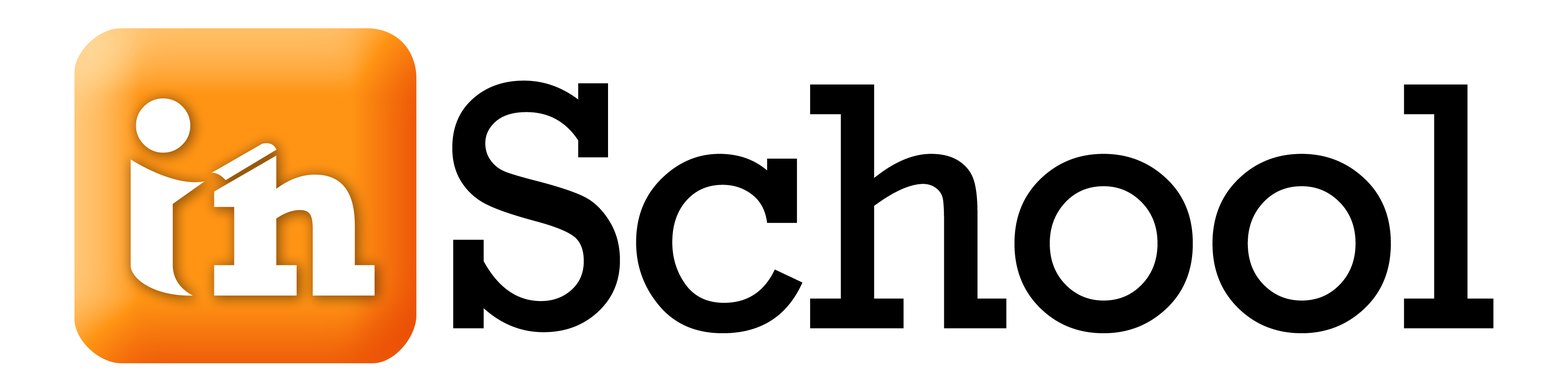
<style>
.page{position:relative;width:1568px;height:392px;background:#ffffff}
.page>*{position:absolute;margin:0}
.t1{font:358.9px "Rockwell";letter-spacing:-0.021em;color:#000000}
</style>
<div class="page">
<p class="t1" style="left:452px;top:81px;width:1042px;height:252px">School</p>
</div>
